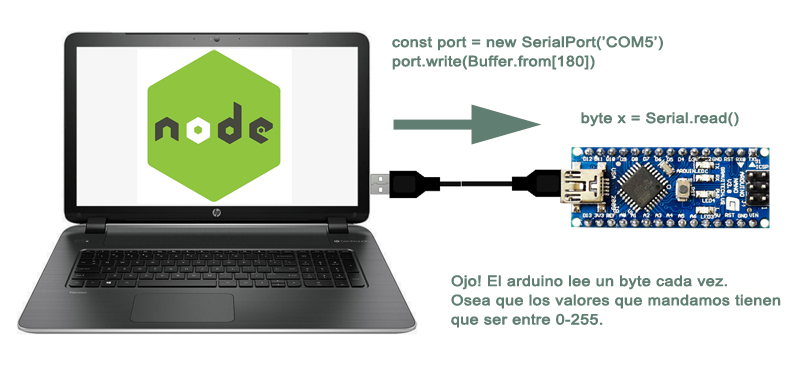
<style>
.page{position:relative;width:800px;height:369px;background:#ffffff}
.page>*{position:absolute;margin:0}
.t1{font:14.4px "ArialMT";color:#607e72;font-weight:bold;scale:1.11 1}
</style>
<div class="page">
<p class="t1" style="left:392px;top:36px;width:271px;height:34px">const port = new SerialPort(’COM5’)<br>port.write(Buffer.from[180])</p>
<p class="t1" style="left:581px;top:112px;width:158px;height:15px">byte x = Serial.read()</p>
<p class="t1" style="left:451px;top:275px;width:330px;height:53px">Ojo! El arduino lee un byte cada vez.<br>Osea que los valores que mandamos tienen<br>que ser entre 0-255.</p>
</div>
